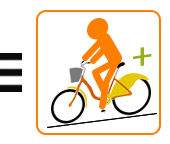
<style>
.page{position:relative;width:170px;height:144px;background:#ffffff}
.page>*{position:absolute;margin:0}
.t1{font:30px "AdobeFanHeitiStd-Bold";color:#99ae19;font-weight:bold}
</style>
<div class="page">
<p class="t1" style="left:133px;top:47px;width:19px;height:19px;rotate:172deg">+</p>
</div>
